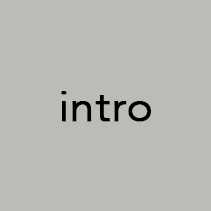
<style>
.page{position:relative;width:211px;height:211px;background:#babdb6}
.page>*{position:absolute;margin:0}
.t1{font:43.8px "Avenir-Light";color:#000000;font-weight:bold}
</style>
<div class="page">
<p class="t1" style="left:61px;top:91px;width:90px;height:31px">intro</p>
</div>
